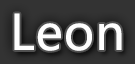
<style>
.page{position:relative;width:135px;height:64px;background:#333333}
.page>*{position:absolute;margin:0}
.t1{font:48px "MicrosoftYaHei";letter-spacing:0.02em;color:#fefefe}
</style>
<div class="page">
<p class="t1" style="left:14px;top:13px;width:108px;height:38px">Leon</p>
</div>
